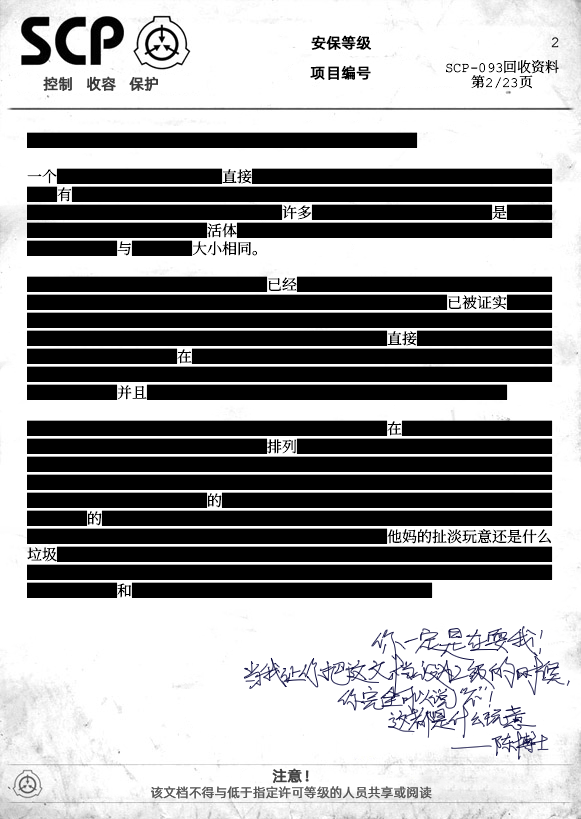
<style>
.page{position:relative;width:581px;height:819px;background:#ffffff}
.page>*{position:absolute;margin:0}
.t1{font:15px "AlibabaPuHuiTiR";color:#000000;font-weight:bold}
.t2{font:14px/15px "ContainmentBreach-Regular";color:#000000}
.t3{font:15px "AlibabaPuHuiTiR";color:#3d3d3d;font-weight:bold}
.t4{font:15px/18px "ContainmentBreach-Regular";color:#000000}
.t5{font:15px "AlibabaPuHuiTiR";color:#414141;font-weight:bold}
.t6{font:13px "AlibabaPuHuiTiR";color:#575757}
</style>
<div class="page">
<p class="t1" style="left:311px;top:35px;width:61px;height:15px">安保等级</p>
<p class="t1" style="left:310px;top:65px;width:61px;height:15px">项目编号</p>
<p class="t2" style="left:446px;top:60px;width:113px;height:29px;text-align:center">SCP-093回收资料<br>第2/23页</p>
<p class="t3" style="left:43px;top:76px;width:115px;height:15px">控制   收容   保护</p>
<p class="t4" style="left:27px;top:132px;width:526px;height:466px">██████████████████████████<br><br>一个███████████直接████████████████████<br>██有████████████████████████████████<br>█████████████████许多████████████是███<br>████████████活体█████████████████████<br>██████与████大小相同。<br><br>████████████████已经█████████████████<br>████████████████████████████已被证实███<br>███████████████████████████████████<br>████████████████████████直接█████████<br>██████████在████████████████████████<br>███████████████████████████████████<br>██████并且████████████████████████<br><br>████████████████████████在██████████<br>████████████████排列█████████████████<br>███████████████████████████████████<br>███████████████████████████████████<br>████████████的██████████████████████<br>████的██████████████████████████████<br>████████████████████████他妈的扯淡玩意还是什么<br>垃圾█████████████████████████████████<br>███████████████████████████████████<br>██████和████████████████████</p>
<p class="t5" style="left:272px;top:768px;width:37px;height:15px">注意！</p>
<p class="t6" style="left:151px;top:786px;width:281px;height:13px">该文档不得与低于指定许可等级的人员共享或阅读</p>
</div>
